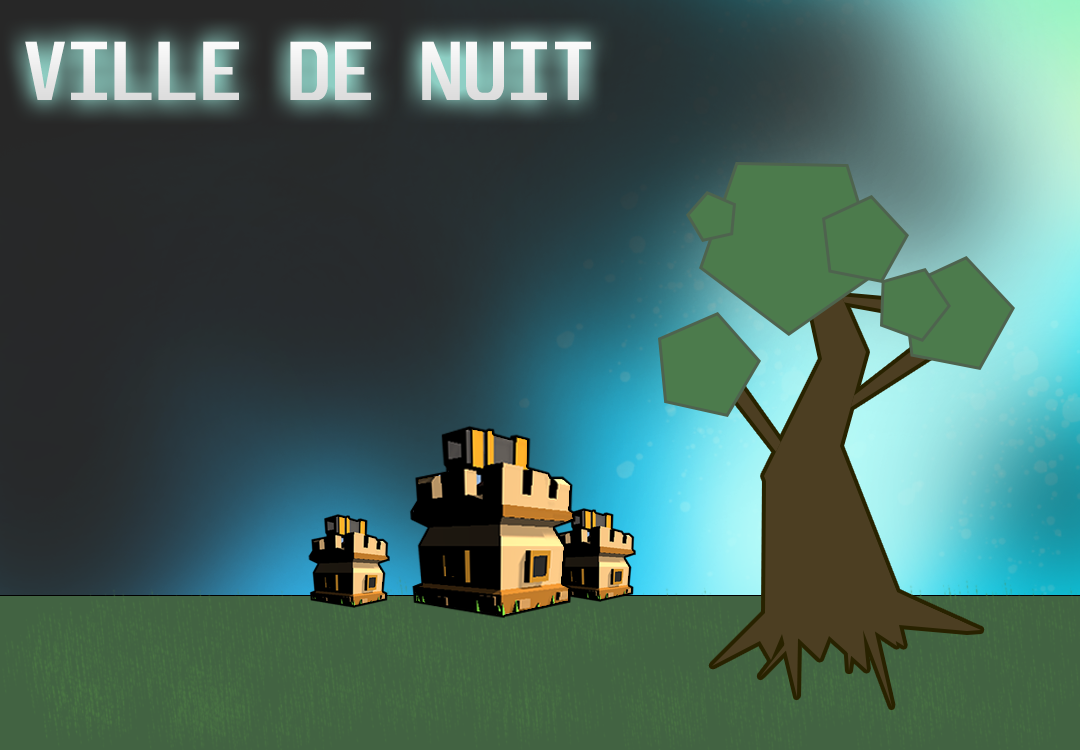
<style>
.page{position:relative;width:1080px;height:750px}
.page>*{position:absolute;margin:0}
.t1{font:72px "Unispace-Bold";color:#fbfafa}
</style>
<div class="page">
<p class="t1" style="left:25px;top:41px;width:566px;height:59px">VILLE DE NUIT</p>
</div>
